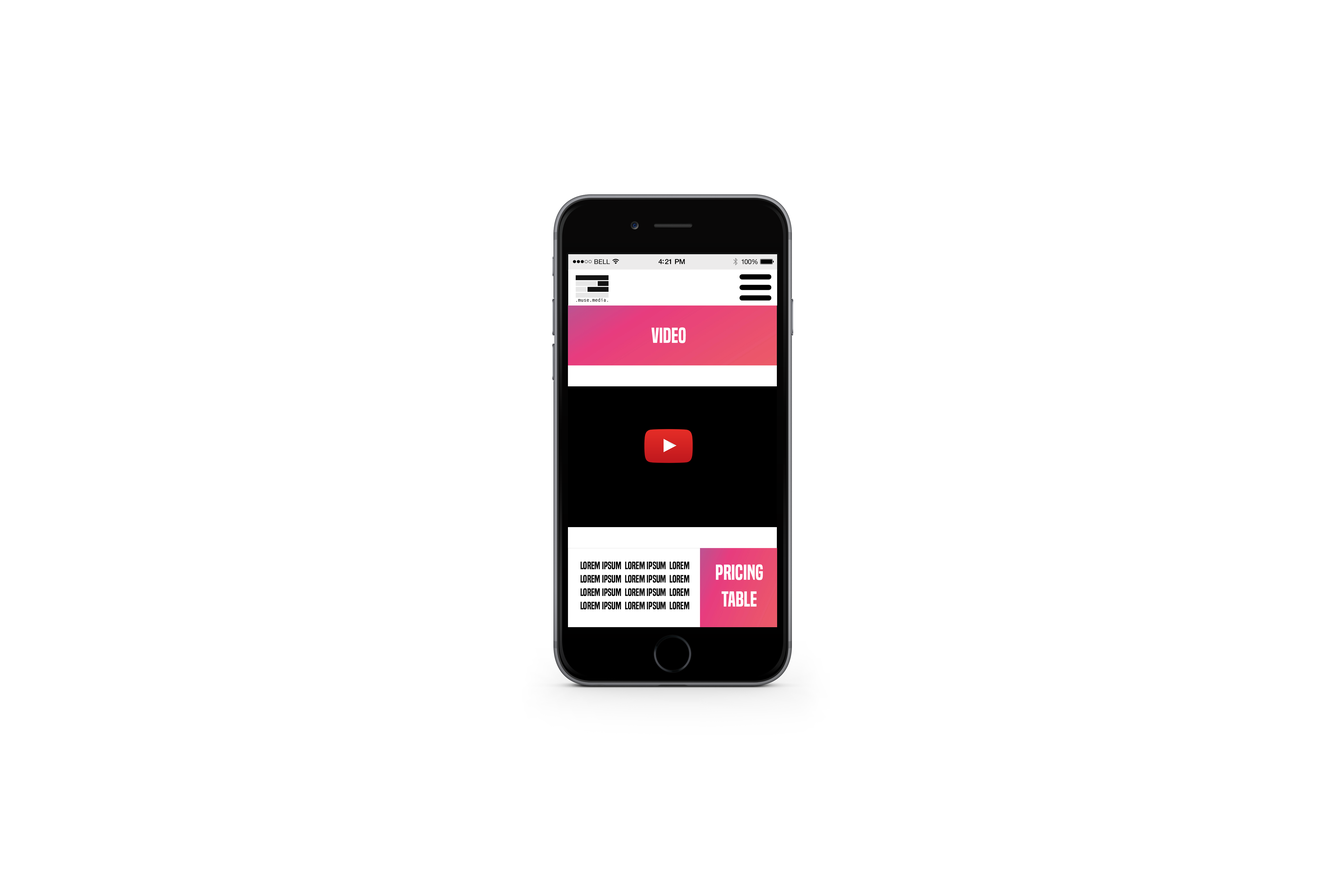
<style>
.page{position:relative;width:1337px;height:892px;background:#ffffff}
.page>*{position:absolute;margin:0}
.t1{font:20.1px "BuiltTitlingSb-Regular";color:#ffffff}
.t2{font:10px/6.7px "BuiltTitlingSb-Regular";color:#000000}
.t3{font:20.1px/6.7px "BuiltTitlingSb-Regular";color:#ffffff}
</style>
<div class="page">
<p class="t1" style="left:652px;top:327px;width:34px;height:16px">VIDEO</p>
<p class="t2" style="left:581px;top:561px;width:109px;height:48px;text-align:center">Lorem Ipsum  Lorem Ipsum  LOREM  <br><br>Lorem Ipsum  Lorem Ipsum  LOREM<br><br>Lorem Ipsum  Lorem Ipsum  LOREM<br><br>Lorem Ipsum  Lorem Ipsum  LOREM</p>
<p class="t3" style="left:716px;top:564px;width:47px;height:42px;text-align:center">Pricing <br><br><br><br>Table</p>
</div>
